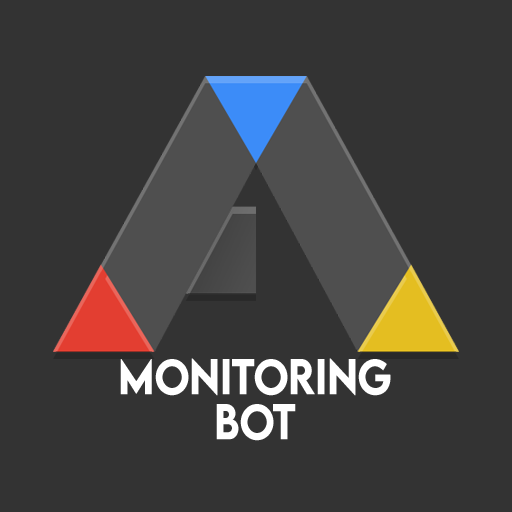
<style>
.page{position:relative;width:512px;height:512px;background:#333333}
.page>*{position:absolute;margin:0}
.t1{font:44px "LEMONMILK-Medium";letter-spacing:-0.02em;color:#ffffff;font-weight:bold;scale:0.91 1}
</style>
<div class="page">
<p class="t1" style="left:120px;top:358px;width:271px;height:38px">Monitoring</p>
<p class="t1" style="left:216px;top:404px;width:80px;height:37px">BOT</p>
</div>
